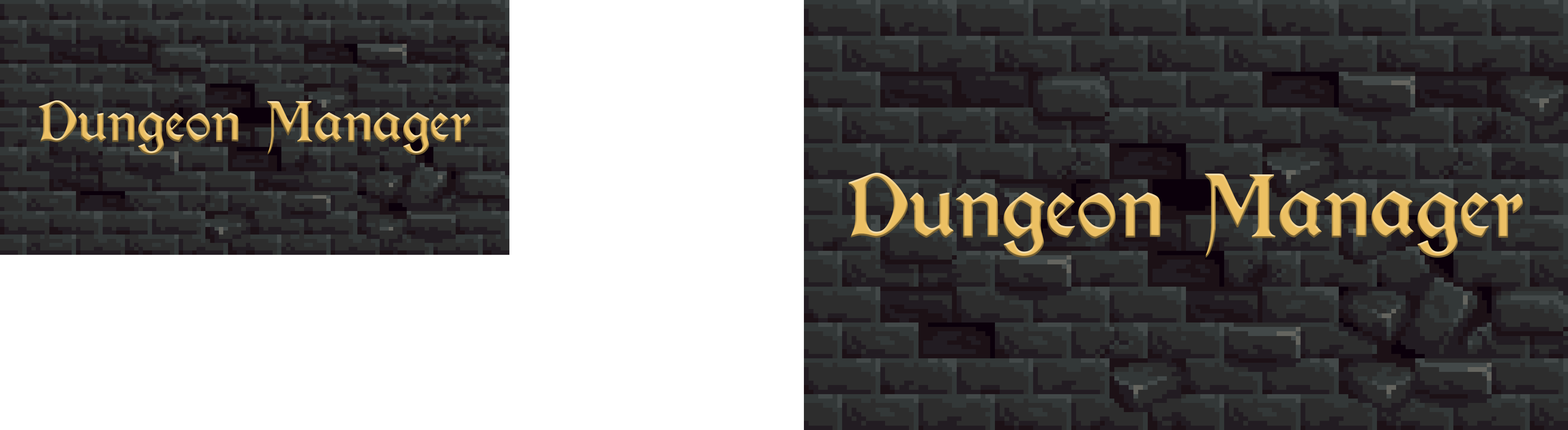
<style>
.page{position:relative;width:1568px;height:430px;background:#ffffff}
.page>*{position:absolute;margin:0}
.t1{font:50.9px "Kelmscott-Regular"}
.t2{font:79.6px "Kelmscott-Regular";color:#ecc674}
</style>
<div class="page">
<p class="t1" style="left:39px;top:100px;width:432px;height:55px">Dungeon Manager</p>
<p class="t2" style="left:848px;top:173px;width:675px;height:84px">Dungeon Manager</p>
</div>
